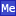
<style>
.page{position:relative;width:16px;height:16px;background:#3f49cb}
.page>*{position:absolute;margin:0}
.t1{font:12px "LucidaConsole";color:#ffffff}
</style>
<div class="page">
<p class="t1" style="left:1px;top:4px;width:15px;height:8px">Me</p>
</div>
